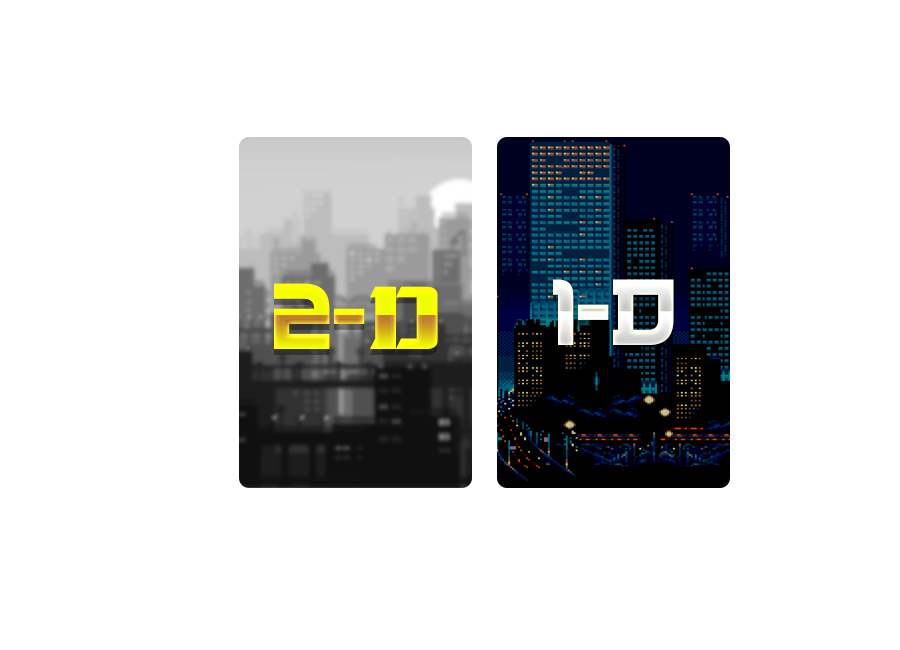
<style>
.page{position:relative;width:900px;height:650px;background:#ffffff}
.page>*{position:absolute;margin:0}
.t1{font:102.6px "Japanese3017";color:#ffffff}
.t2{font:102.6px "Japanese3017"}
.t3{font:89px "LaOrientalBold"}
</style>
<div class="page">
<p class="t1" style="left:553px;top:279px;width:121px;height:66px">1-d</p>
<p class="t2" style="left:274px;top:283px;width:164px;height:66px">2-<span class="t3">D</span></p>
</div>
